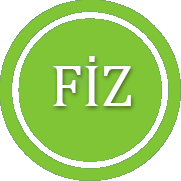
<style>
.page{position:relative;width:181px;height:181px;background:#80c536}
.page>*{position:absolute;margin:0}
.t1{font:60px "Cambria";color:#ffffff}
</style>
<div class="page">
<p class="t1" style="left:53px;top:56px;width:78px;height:50px">FİZ</p>
</div>
